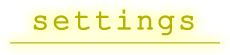
<style>
.page{position:relative;width:230px;height:55px}
.page>*{position:absolute;margin:0}
.t1{font:30.2px "CourierNewPSMT";letter-spacing:0.07em;color:#b4b400;font-weight:bold;text-decoration:underline}
</style>
<div class="page">
<p class="t1" style="left:10px;top:9px;width:210px;height:35px">settings</p>
</div>
